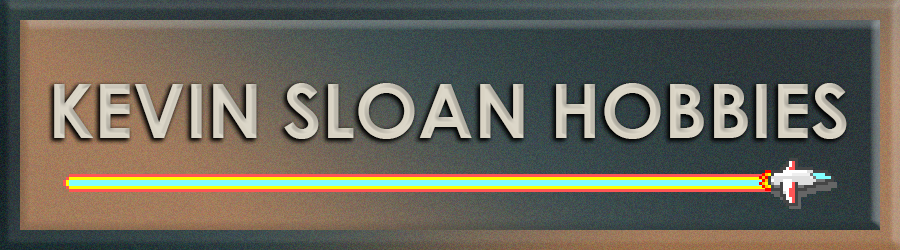
<style>
.page{position:relative;width:900px;height:250px}
.page>*{position:absolute;margin:0}
.t1{font:75px "CenturyGothic-Bold";color:#dcd7c9}
</style>
<div class="page">
<p class="t1" style="left:54px;top:83px;width:793px;height:56px">KEVIN SLOAN HOBBIES</p>
</div>
